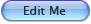
<style>
.page{position:relative;width:91px;height:24px}
.page>*{position:absolute;margin:0}
.t1{font:12px "LucidaSansUnicode";color:#24303d}
</style>
<div class="page">
<p class="t1" style="left:24px;top:6px;width:42px;height:9px">Edit Me</p>
</div>
